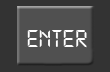
<style>
.page{position:relative;width:110px;height:72px;background:#333333}
.page>*{position:absolute;margin:0}
.t1{font:26px "DS-Digital";letter-spacing:-0.025em;color:#ffffff}
</style>
<div class="page">
<p class="t1" style="left:27px;top:30px;width:60px;height:18px">Enter</p>
</div>
